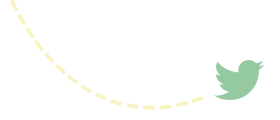
<style>
.page{position:relative;width:280px;height:120px;background:#ffffff}
.page>*{position:absolute;margin:0}
.t1{font:36px/56px "AdventPro-Bold";letter-spacing:0.025em;color:#f8f3c3;text-transform:uppercase}
</style>
<div class="page">
<p class="t1" style="left:9px;top:0px;width:195px;height:110px;text-align:center">-------------------</p>
</div>
